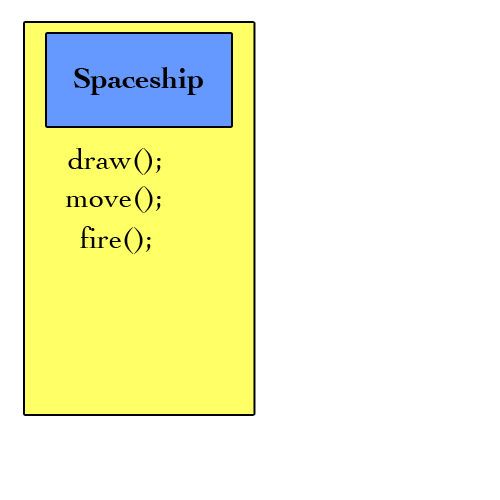
<style>
.page{position:relative;width:500px;height:500px;background:#ffffff}
.page>*{position:absolute;margin:0}
.t1{font:30px "Cochin";color:#000000}
</style>
<div class="page">
<p class="t1" style="left:68px;top:148px;width:93px;height:27px">draw();</p>
<p class="t1" style="left:65px;top:186px;width:96px;height:27px">move();</p>
<p class="t1" style="left:80px;top:226px;width:71px;height:28px">fire();</p>
</div>
